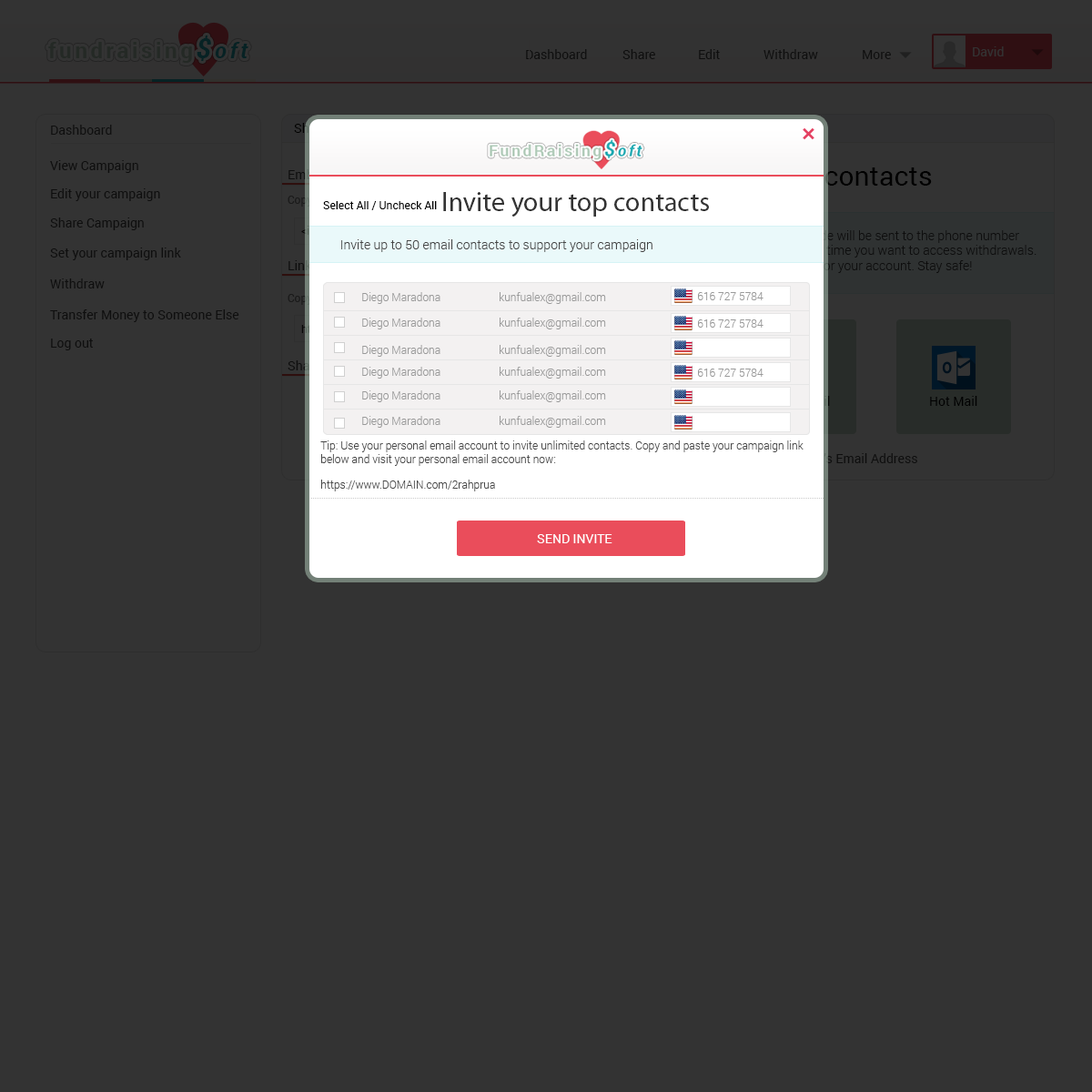
<style>
.page{position:relative;width:1092px;height:1092px;background:#333333}
.page>*{position:absolute;margin:0}
.t1{font:21.8px "Roboto-Bold";letter-spacing:0.15em}
.t2{font:27.3px "Roboto-BoldItalic";letter-spacing:0.15em}
.t3{font:21.8px "Roboto-BoldItalic";letter-spacing:0.15em}
.t4{font:12.7px "Roboto-Regular";color:#0e0e0e}
.t5{font:12.7px "Roboto-Regular";color:#333333}
.t6{font:27.3px "MyriadPro-Regular";color:#333333}
.t7{font:10.9px "Roboto-Regular";color:#000000}
.t8{font:12.7px "Roboto-Light";color:#464646}
.t9{font:10.9px "Roboto-Light";color:#9a9a9a}
.t10{font:12.7px "Roboto-Regular";color:#000000}
.t11{font:10.9px "Roboto-Light";color:#464646}
.t12{font:12.7px "Roboto-Regular";color:#ffffff;text-transform:uppercase}
</style>
<div class="page">
<p class="t1" style="left:48px;top:35px;width:200px;height:28px">fundraising<span class="t2">$</span><span class="t3">oft</span></p>
<p class="t4" style="left:526px;top:49px;width:61px;height:10px">Dashboard</p>
<p class="t4" style="left:622px;top:49px;width:33px;height:10px">Share</p>
<p class="t4" style="left:699px;top:49px;width:21px;height:10px">Edit</p>
<p class="t4" style="left:763px;top:49px;width:55px;height:10px">Withdraw</p>
<p class="t4" style="left:863px;top:50px;width:28px;height:9px">More</p>
<p class="t5" style="left:973px;top:46px;width:31px;height:10px">David</p>
<p class="t4" style="left:51px;top:125px;width:61px;height:10px">Dashboard</p>
<p class="t4" style="left:50px;top:160px;width:88px;height:13px">View Campaign</p>
<p class="t4" style="left:51px;top:188px;width:109px;height:13px">Edit your campaign</p>
<p class="t6" style="left:443px;top:192px;width:266px;height:25px">Invite your top contacts</p>
<p class="t7" style="left:323px;top:201px;width:114px;height:9px">Select All / Uncheck All</p>
<p class="t4" style="left:50px;top:217px;width:94px;height:13px">Share Campaign</p>
<p class="t8" style="left:341px;top:239px;width:311px;height:13px">Invite up to 50 email contacts to support your campaign</p>
<p class="t4" style="left:50px;top:248px;width:131px;height:12px">Set your campaign link</p>
<p class="t4" style="left:50px;top:278px;width:55px;height:10px">Withdraw</p>
<p class="t9" style="left:362px;top:292px;width:78px;height:12px">Diego Maradona</p>
<p class="t9" style="left:500px;top:292px;width:106px;height:12px">kunfualex@gmail.com</p>
<p class="t9" style="left:698px;top:292px;width:65px;height:8px">616 727 5784</p>
<p class="t4" style="left:50px;top:309px;width:189px;height:13px">Transfer Money to Someone Else</p>
<p class="t9" style="left:362px;top:318px;width:78px;height:11px">Diego Maradona</p>
<p class="t9" style="left:500px;top:318px;width:106px;height:11px">kunfualex@gmail.com</p>
<p class="t9" style="left:698px;top:319px;width:65px;height:9px">616 727 5784</p>
<p class="t4" style="left:51px;top:339px;width:42px;height:11px">Log out</p>
<p class="t9" style="left:362px;top:345px;width:78px;height:12px">Diego Maradona</p>
<p class="t9" style="left:500px;top:345px;width:106px;height:12px">kunfualex@gmail.com</p>
<p class="t9" style="left:362px;top:367px;width:78px;height:12px">Diego Maradona</p>
<p class="t9" style="left:500px;top:367px;width:106px;height:12px">kunfualex@gmail.com</p>
<p class="t9" style="left:698px;top:369px;width:65px;height:8px">616 727 5784</p>
<p class="t9" style="left:362px;top:390px;width:78px;height:12px">Diego Maradona</p>
<p class="t9" style="left:500px;top:390px;width:106px;height:12px">kunfualex@gmail.com</p>
<p class="t10" style="left:930px;top:396px;width:47px;height:10px">Hot Mail</p>
<p class="t9" style="left:362px;top:416px;width:78px;height:12px">Diego Maradona</p>
<p class="t9" style="left:500px;top:416px;width:106px;height:12px">kunfualex@gmail.com</p>
<p class="t11" style="left:320px;top:440px;width:484px;height:51px">Tip: Use your personal email account to invite unlimited contacts. Copy and paste your campaign link below and visit your personal email account now:<br><br>https://www.DOMAIN.com/2rahprua</p>
<p class="t12" style="left:537px;top:534px;width:75px;height:9px">SEND INVITE</p>
</div>
